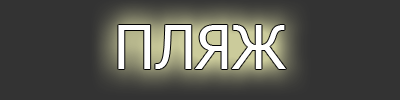
<style>
.page{position:relative;width:400px;height:100px;background:#333333}
.page>*{position:absolute;margin:0}
.t1{font:60px "Tahoma";color:#ffffff}
</style>
<div class="page">
<p class="t1" style="left:118px;top:25px;width:168px;height:44px">ПЛЯЖ</p>
</div>
